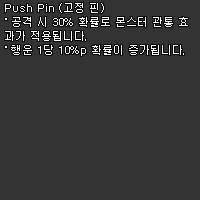
<style>
.page{position:relative;width:200px;height:200px;background:#333333}
.page>*{position:absolute;margin:0}
.t1{font:11px/14px "Dotum";color:#ffffff}
</style>
<div class="page">
<p class="t1" style="left:5px;top:3px;width:183px;height:53px">Push Pin (고정 핀)<br>˚ 공격 시 30% 확률로 몬스터 관통 효<br>과가 적용됩니다.<br>˚ 행운 1당 10%p 확률이 증가됩니다.</p>
</div>
